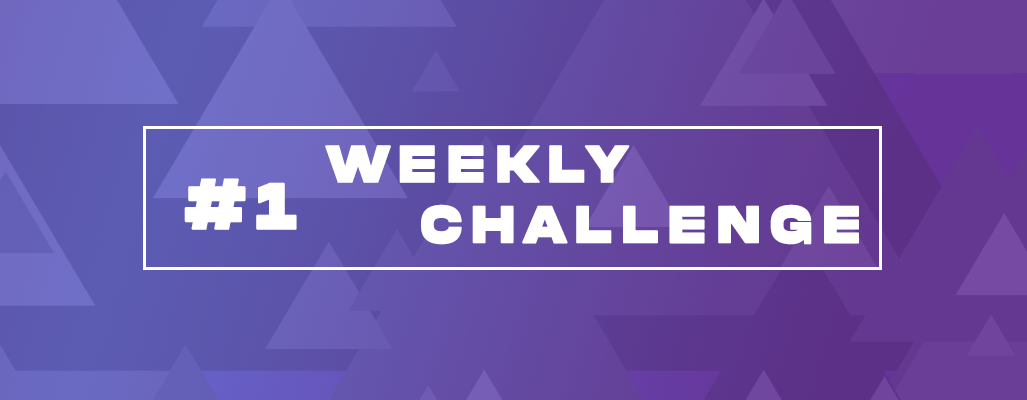
<style>
.page{position:relative;width:1027px;height:400px}
.page>*{position:absolute;margin:0}
.t1{font:54.9px "AkiraExpanded-SuperBold";letter-spacing:0.2em;color:#ffffff;text-transform:uppercase;font-weight:bold;scale:0.8 1}
.t2{font:68.6px "AkiraExpanded-SuperBold";letter-spacing:0.2em;color:#ffffff;text-transform:uppercase;font-weight:bold;scale:0.8 1}
</style>
<div class="page">
<p class="t1" style="left:325px;top:145px;width:305px;height:38px">WEEKLY</p>
<p class="t2" style="left:184px;top:178px;width:113px;height:52px">#1</p>
<p class="t1" style="left:421px;top:204px;width:438px;height:41px">challenge</p>
</div>
